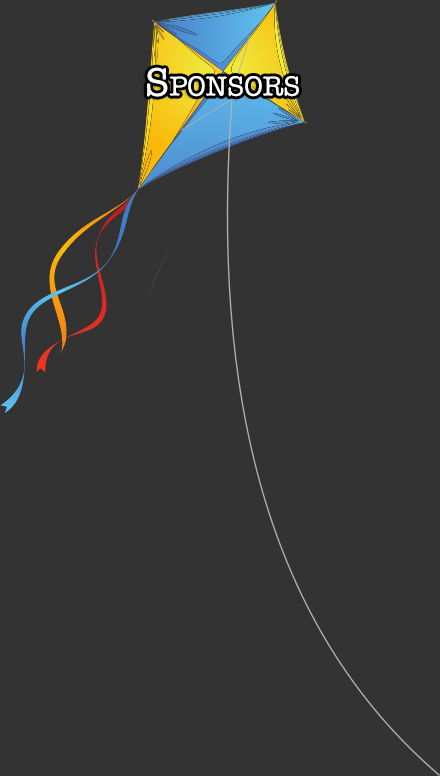
<style>
.page{position:relative;width:440px;height:776px;background:#333333}
.page>*{position:absolute;margin:0}
.t1{font:40px "AmericanTypewriter";color:#ffffff;font-variant:small-caps}
</style>
<div class="page">
<p class="t1" style="left:147px;top:67px;width:152px;height:30px">Sponsors</p>
</div>
